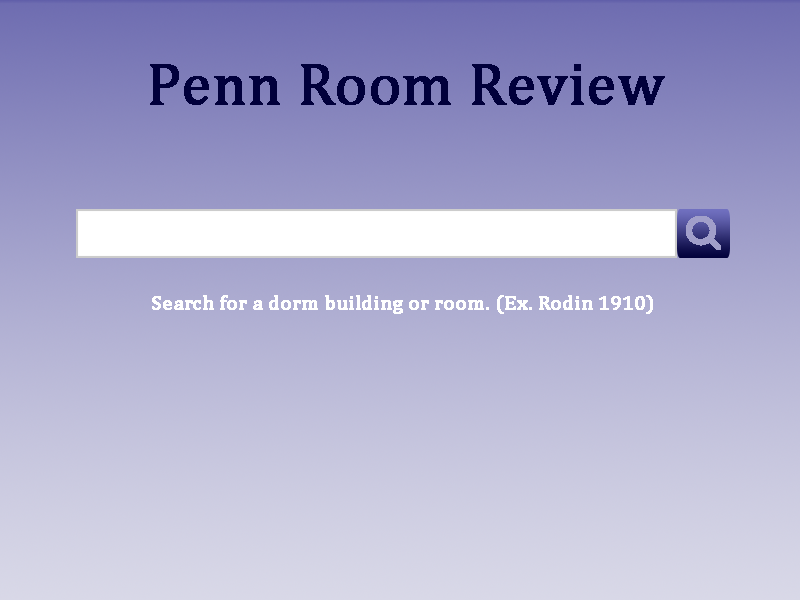
<style>
.page{position:relative;width:800px;height:600px}
.page>*{position:absolute;margin:0}
.t1{font:60px "Cambria";color:#01003b;font-weight:bold}
.t2{font:20px "Cambria";color:#ffffff;font-weight:bold}
</style>
<div class="page">
<p class="t1" style="left:150px;top:64px;width:515px;height:41px">Penn Room Review</p>
<p class="t2" style="left:152px;top:295px;width:501px;height:19px">Search for a dorm building or room. (Ex. Rodin 1910)</p>
</div>
